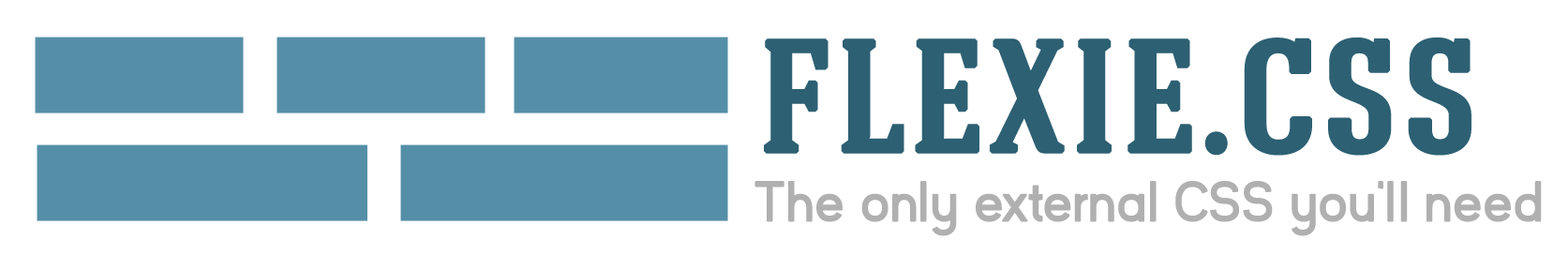
<style>
.page{position:relative;width:1568px;height:255px;background:#ffffff}
.page>*{position:absolute;margin:0}
.t1{font:174.2px "HaginCapsMedium";color:#2d6073;font-weight:bold}
.t2{font:55.7px "KayakSans";color:#b1b1b1;font-weight:bold}
</style>
<div class="page">
<p class="t1" style="left:764px;top:37px;width:707px;height:119px">flexie.css</p>
<p class="t2" style="left:754px;top:181px;width:788px;height:55px">The only external CSS you’ll need</p>
</div>
